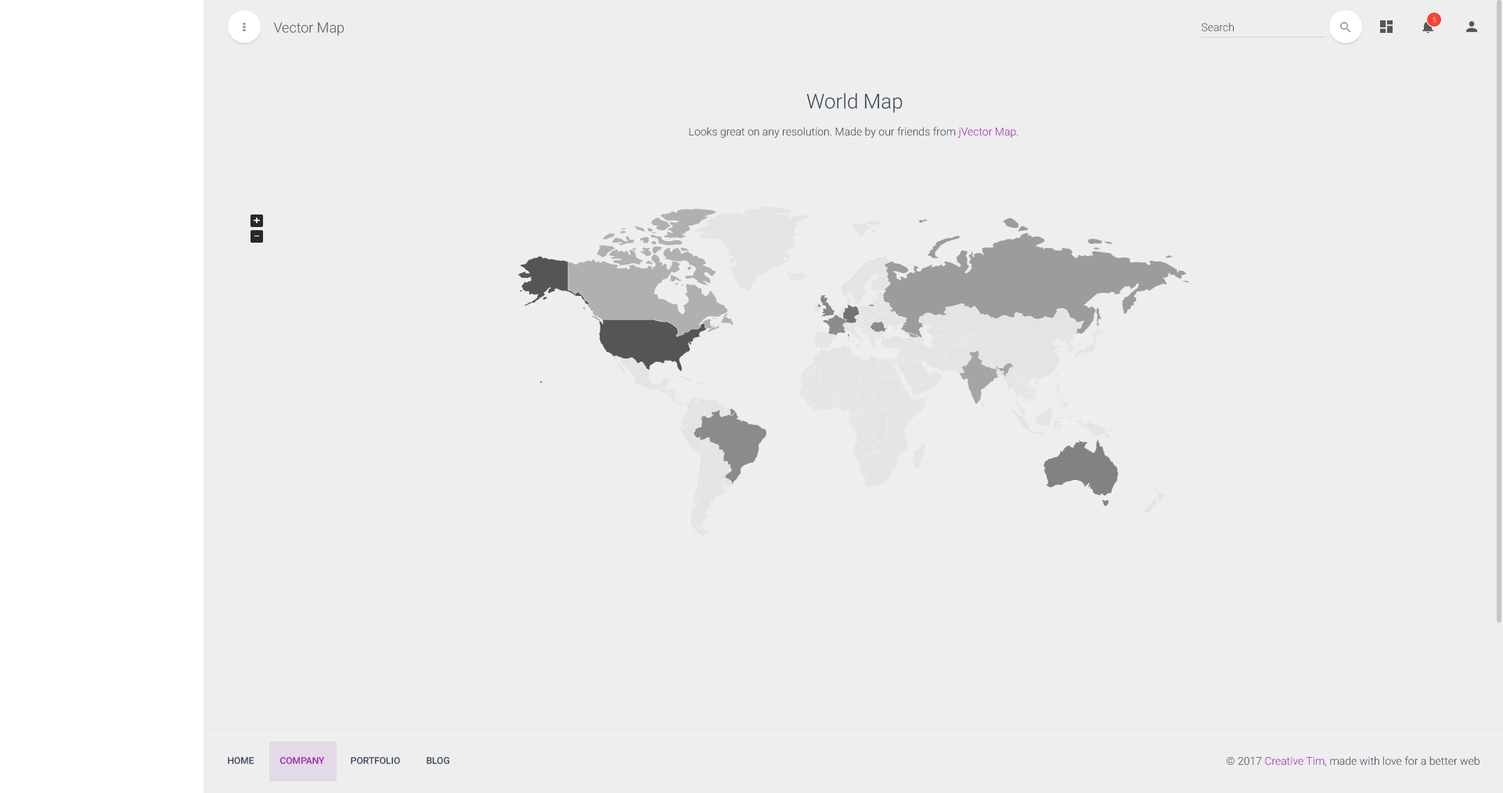
<style>
.page{position:relative;width:1503px;height:793px;background:#eeeeee}
.page>*{position:absolute;margin:0}
.t1{font:7px "Roboto-Light"}
.t2{font:14.1px "Roboto-Light";color:#555555}
.t3{font:11px "Roboto-Light";color:#555555}
.t4{font:20.4px "Roboto-Light";color:#3c4858}
.t5{font:11px "Roboto-Light";color:#3c4858}
.t6{font:11px "Roboto-Light";color:#9c27b0}
.t7{font:9.4px "Roboto-Medium";color:#3c4858}
.t8{font:9.4px "Roboto-Medium";color:#9c27b0}
</style>
<div class="page">
<p class="t1" style="left:1433px;top:17px;width:4px;height:6px">5</p>
<p class="t2" style="left:273px;top:22px;width:71px;height:14px">Vector Map</p>
<p class="t3" style="left:1202px;top:23px;width:32px;height:8px">Search</p>
<p class="t4" style="left:806px;top:93px;width:97px;height:20px">World Map</p>
<p class="t5" style="left:689px;top:127px;width:330px;height:11px">Looks great on any resolution. Made by our friends from <span class="t6">jVector Map</span>.</p>
<p class="t7" style="left:228px;top:757px;width:26px;height:7px">HOME</p>
<p class="t8" style="left:280px;top:757px;width:45px;height:7px">COMPANY</p>
<p class="t7" style="left:351px;top:757px;width:49px;height:7px">PORTFOLIO</p>
<p class="t7" style="left:427px;top:757px;width:22px;height:7px">BLOG</p>
<p class="t5" style="left:1227px;top:756px;width:253px;height:11px">© 2017 <span class="t6">Creative Tim</span>, made with love for a better web</p>
</div>
